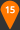
<style>
.page{position:relative;width:20px;height:30px;background:#ff7800}
.page>*{position:absolute;margin:0}
.t1{font:9px "OpenSans";color:#ffffff;font-weight:bold}
</style>
<div class="page">
<p class="t1" style="left:5px;top:6px;width:10px;height:8px">15</p>
</div>
